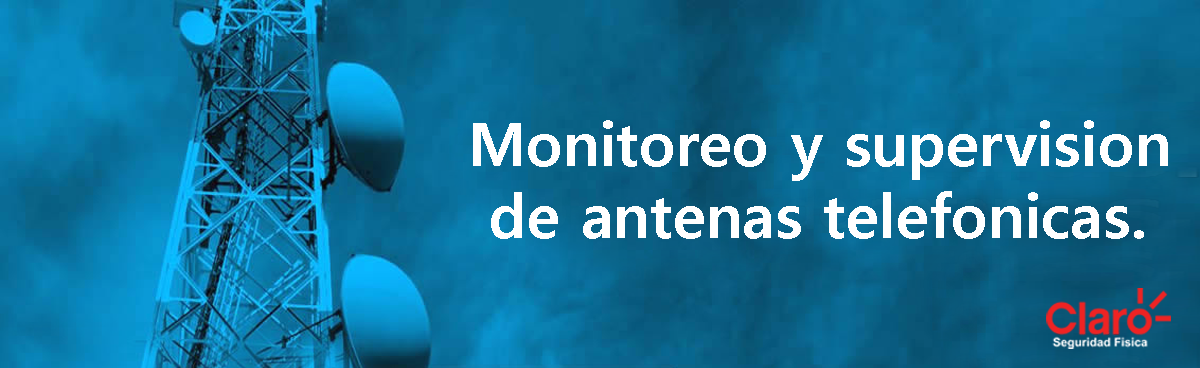
<style>
.page{position:relative;width:1200px;height:368px}
.page>*{position:absolute;margin:0}
.t1{font:60px "MalgunGothicBold";color:#ffffff}
</style>
<div class="page">
<p class="t1" style="left:473px;top:120px;width:695px;height:119px">Monitoreo y supervision<br> de antenas telefonicas.</p>
</div>
